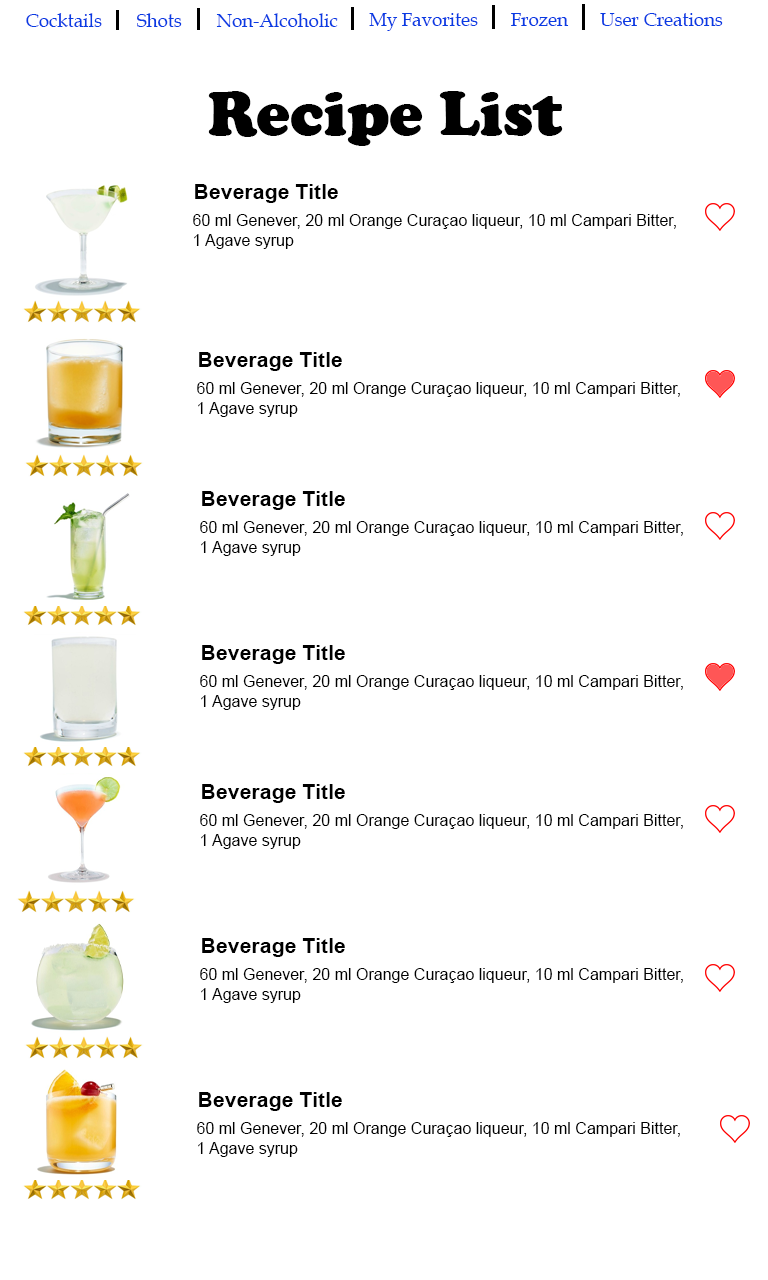
<style>
.page{position:relative;width:768px;height:1280px;background:#ffffff}
.page>*{position:absolute;margin:0}
.t1{font:18.7px "BookAntiqua";color:#093be3}
.t2{font:64px "CooperBlack";color:#000000}
.t3{font:21.3px "Arial-BoldMT";color:#000000}
.t4{font:16px "ArialMT";color:#000000}
</style>
<div class="page">
<p class="t1" style="left:26px;top:13px;width:76px;height:14px">Cocktails</p>
<p class="t1" style="left:137px;top:13px;width:45px;height:14px">Shots</p>
<p class="t1" style="left:216px;top:13px;width:122px;height:14px">Non-Alcoholic</p>
<p class="t1" style="left:369px;top:13px;width:109px;height:18px">My Favorites</p>
<p class="t1" style="left:511px;top:13px;width:58px;height:13px">Frozen</p>
<p class="t1" style="left:600px;top:13px;width:123px;height:13px">User Creations</p>
<p class="t2" style="left:208px;top:91px;width:355px;height:55px">Recipe List</p>
<p class="t3" style="left:195px;top:184px;width:143px;height:19px">Beverage Title</p>
<p class="t4" style="left:193px;top:214px;width:483px;height:35px">60 ml Genever, 20 ml Orange Curaçao liqueur, 10 ml Campari Bitter, <br>1 Agave syrup</p>
</div>
